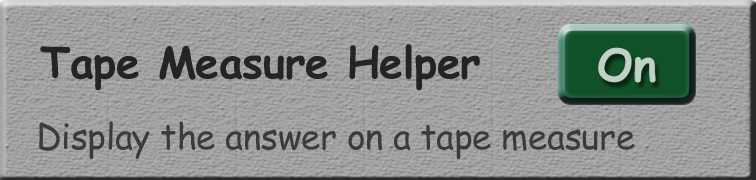
<style>
.page{position:relative;width:756px;height:180px}
.page>*{position:absolute;margin:0}
.t1{font:43px "ComicSansMS-Bold";letter-spacing:-0.01em;color:#242424}
.t2{font:35px "ComicSansMS";letter-spacing:-0.01em;color:#3c3b3b}
</style>
<div class="page">
<p class="t1" style="left:40px;top:44px;width:440px;height:47px">Tape Measure Helper</p>
<p class="t2" style="left:39px;top:121px;width:596px;height:38px">Display the answer on a tape measure</p>
</div>
